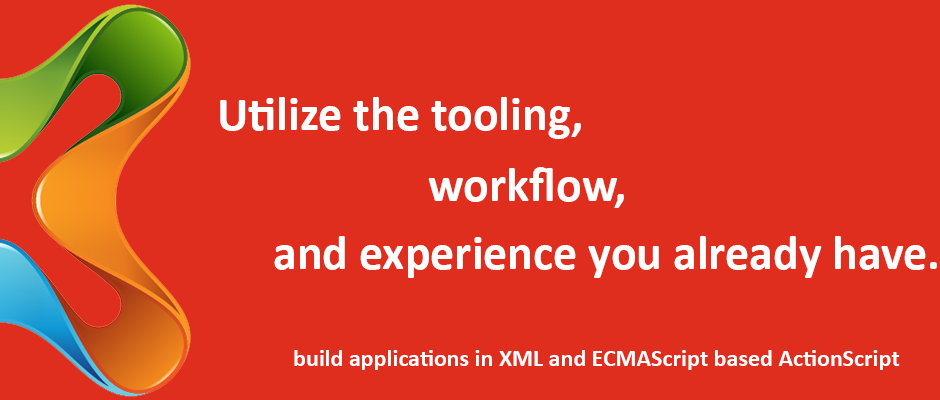
<style>
.page{position:relative;width:940px;height:400px;background:#df2e1e}
.page>*{position:absolute;margin:0}
.t1{font:48px "Calibri-Bold";color:#ffffff}
.t2{font:24px "Calibri-Bold";color:#ffffff}
</style>
<div class="page">
<p class="t1" style="left:220px;top:97px;width:361px;height:42px">Utilize the tooling,</p>
<p class="t1" style="left:428px;top:167px;width:196px;height:41px">workflow,</p>
<p class="t1" style="left:274px;top:236px;width:663px;height:42px">and experience you already have.</p>
<p class="t2" style="left:294px;top:350px;width:606px;height:20px">build applications in XML and ECMAScript based ActionScript</p>
</div>
